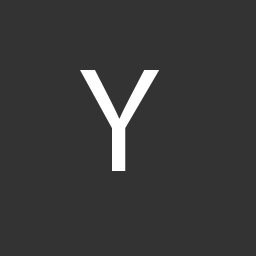
<style>
.page{position:relative;width:256px;height:256px;background:#333333}
.page>*{position:absolute;margin:0}
.t1{font:150px "MyriadPro-Regular";color:#ffffff}
</style>
<div class="page">
<p class="t1" style="left:80px;top:70px;width:80px;height:101px">Y</p>
</div>
